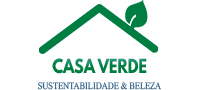
<style>
.page{position:relative;width:210px;height:90px;background:#ffffff}
.page>*{position:absolute;margin:0}
.t1{font:17.2px "LeagueSpartan-Bold";color:#007d40;text-transform:uppercase;scale:0.84 1}
.t2{font:14.8px "Microsoft-Himalaya";color:#286185;text-transform:uppercase;scale:0.84 1}
</style>
<div class="page">
<p class="t1" style="left:52px;top:58px;width:95px;height:16px">Casa verde</p>
<p class="t2" style="left:38px;top:82px;width:123px;height:8px">sustentabilidade &amp; beleza</p>
</div>
